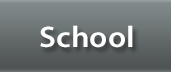
<style>
.page{position:relative;width:171px;height:72px}
.page>*{position:absolute;margin:0}
.t1{font:30px "MyriadPro-Semibold";color:#ffffff;scale:1.08 1}
</style>
<div class="page">
<p class="t1" style="left:40px;top:25px;width:93px;height:23px">School</p>
</div>
